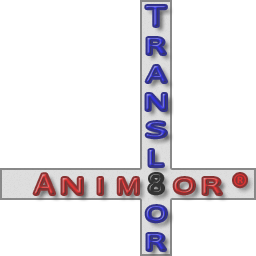
<style>
.page{position:relative;width:256px;height:256px;background:#ffffff}
.page>*{position:absolute;margin:0}
.t1{font:31.7px "Calibri";scale:1.31 1}
.t2{font:25.6px "Calibri";scale:1.62 1}
.t3{font:25.3px "Calibri";scale:1.42 1}
.t4{font:25.3px "Calibri";scale:1.62 1}
.t5{font:23.4px "Calibri";scale:2.12 1}
.t6{font:25.3px "Calibri";scale:1.65 1}
.t7{font:31.4px "Calibri";scale:1.14 1}
.t8{font:32px "Calibri";color:#dd3232}
.t9{font:25.6px "Calibri";scale:1.09 1}
.t10{font:23.4px "Calibri";scale:1.47 1}
</style>
<div class="page">
<p class="t1" style="left:146px;top:6px;width:20px;height:20px">T</p>
<p class="t2" style="left:147px;top:38px;width:18px;height:16px">R</p>
<p class="t3" style="left:146px;top:66px;width:20px;height:16px">A</p>
<p class="t4" style="left:146px;top:94px;width:20px;height:16px">N</p>
<p class="t5" style="left:146px;top:122px;width:20px;height:16px">S</p>
<p class="t6" style="left:149px;top:150px;width:14px;height:16px">L</p>
<p class="t7" style="left:34px;top:174px;width:20px;height:20px">A</p>
<p class="t8" style="left:234px;top:174px;width:12px;height:13px">®</p>
<p class="t4" style="left:62px;top:178px;width:20px;height:16px">N</p>
<p class="t9" style="left:118px;top:178px;width:20px;height:16px">M</p>
<p class="t10" style="left:174px;top:178px;width:20px;height:16px">O</p>
<p class="t2" style="left:203px;top:178px;width:18px;height:16px">R</p>
<p class="t10" style="left:146px;top:206px;width:20px;height:16px">O</p>
<p class="t2" style="left:147px;top:234px;width:18px;height:16px">R</p>
</div>
